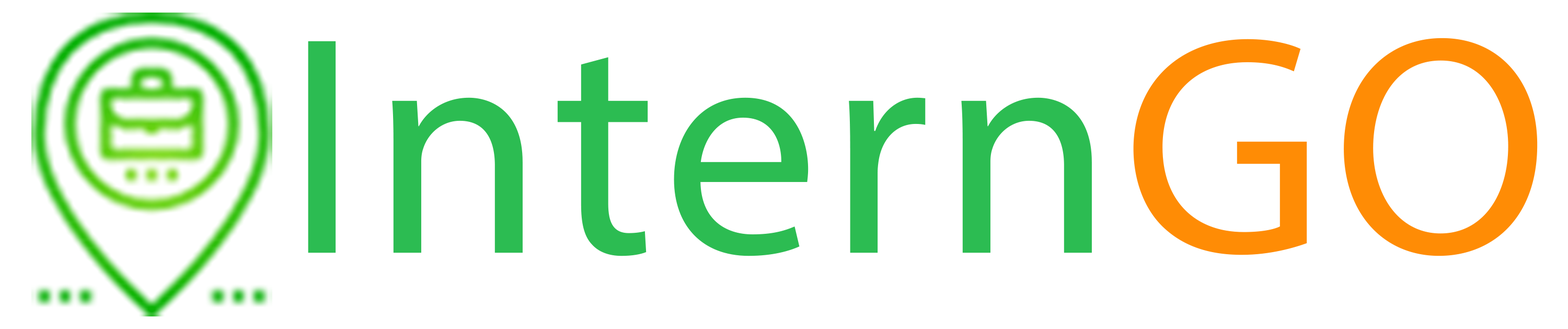
<style>
.page{position:relative;width:1568px;height:329px;background:#ffffff}
.page>*{position:absolute;margin:0}
.t1{font:313.3px "MyriadPro-Regular";color:#2cbc52;font-weight:bold}
.t2{font:313.3px "MyriadPro-Regular";color:#ff8c05;font-weight:bold}
</style>
<div class="page">
<p class="t1" style="left:308px;top:38px;width:1230px;height:218px">Intern<span class="t2">GO</span></p>
</div>
